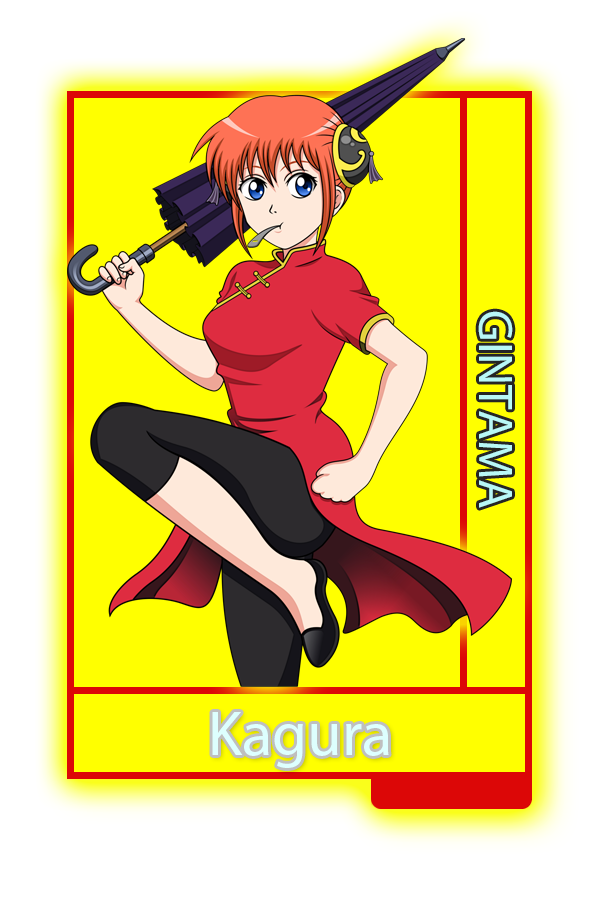
<style>
.page{position:relative;width:600px;height:900px;background:#ffff00}
.page>*{position:absolute;margin:0}
.t1{font:48.8px "MyriadPro-Regular";color:#b8f8f7}
.t2{font:62.5px "MyriadPro-Regular";color:#ddfffe}
</style>
<div class="page">
<p class="t1" style="left:478px;top:311px;width:35px;height:197px;rotate:90deg">GINTAMA</p>
<p class="t2" style="left:212px;top:712px;width:177px;height:56px">Kagura</p>
</div>
